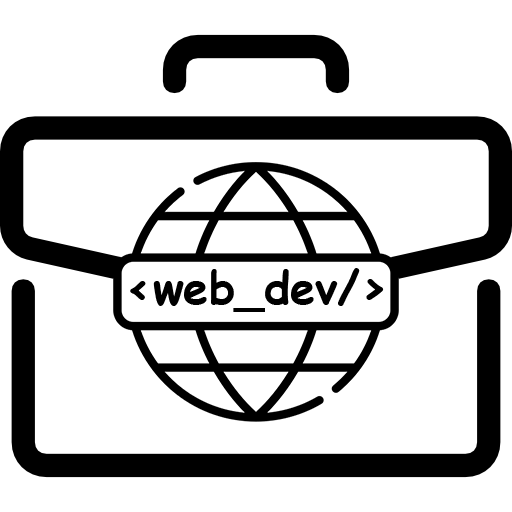
<style>
.page{position:relative;width:512px;height:512px;background:#ffffff}
.page>*{position:absolute;margin:0}
.t1{font:45px "ComicSansMS-Bold";color:#000000}
</style>
<div class="page">
<p class="t1" style="left:130px;top:268px;width:254px;height:44px">&lt;web_dev/&gt;</p>
</div>
